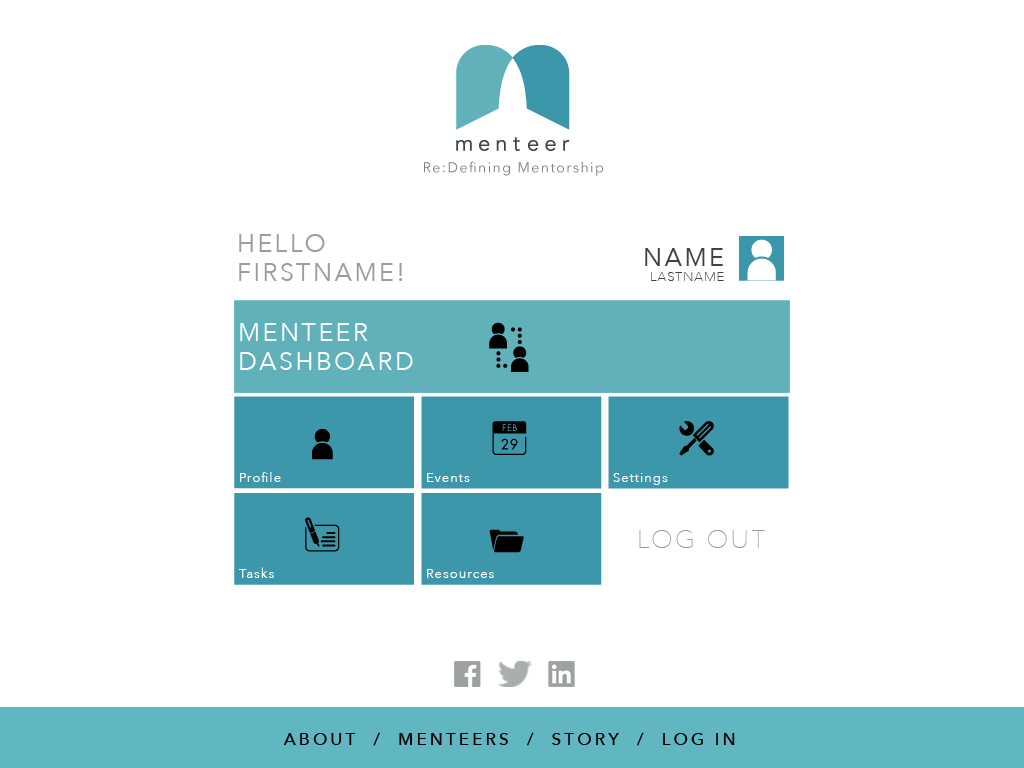
<style>
.page{position:relative;width:1024px;height:768px;background:#ffffff}
.page>*{position:absolute;margin:0}
.t1{font:25px/29.2px "AvenirNext-Regular";letter-spacing:0.1em;color:#999d9e}
.t2{font:12.5px "AvenirNext-UltraLight";letter-spacing:0.1em;color:#3e4243}
.t3{font:25px/29.2px "AvenirNext-Regular";letter-spacing:0.1em;color:#3e4243}
.t4{font:25px/29.2px "AvenirNext-Regular";letter-spacing:0.1em;color:#ffffff}
.t5{font:12.5px "AvenirNext-Regular";letter-spacing:0.1em;color:#ffffff}
.t6{font:25px "AvenirNext-UltraLight";letter-spacing:0.1em;color:#999d9e}
.t7{font:16.7px "AvenirNext-Medium";letter-spacing:0.2em;color:#000000}
</style>
<div class="page">
<p class="t1" style="left:239px;top:234px;width:163px;height:47px">HELLO<br>FIRSTNAME!</p>
<p class="t2" style="left:645px;top:248px;width:79px;height:33px;text-align:right"><span class="t3">NAME<br></span>LASTNAME</p>
<p class="t4" style="left:240px;top:323px;width:173px;height:47px">MENTEER<br>DASHBOARD</p>
<p class="t5" style="left:240px;top:472px;width:41px;height:10px">Profile</p>
<p class="t5" style="left:427px;top:473px;width:43px;height:9px">Events</p>
<p class="t5" style="left:613px;top:473px;width:55px;height:12px">Settings</p>
<p class="t6" style="left:639px;top:530px;width:126px;height:18px">LOG OUT</p>
<p class="t5" style="left:239px;top:567px;width:35px;height:11px">Tasks</p>
<p class="t5" style="left:427px;top:569px;width:67px;height:9px">Resources</p>
<p class="t7" style="left:283px;top:732px;width:452px;height:14px">ABOUT  /  MENTEERS  /  STORY  /  LOG IN</p>
</div>
